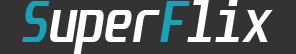
<style>
.page{position:relative;width:296px;height:54px;background:#333333}
.page>*{position:absolute;margin:0}
.t1{font:50px "Unispace-Bold";color:#ffffff;font-style:italic;scale:0.91 1}
.t2{font:50px "Unispace-Bold";color:#17a2b8;font-style:italic;scale:0.91 1}
</style>
<div class="page">
<p class="t1" style="left:22px;top:0px;width:251px;height:54px"><span class="t2">S</span>uper<span class="t2">F</span>lix</p>
</div>
